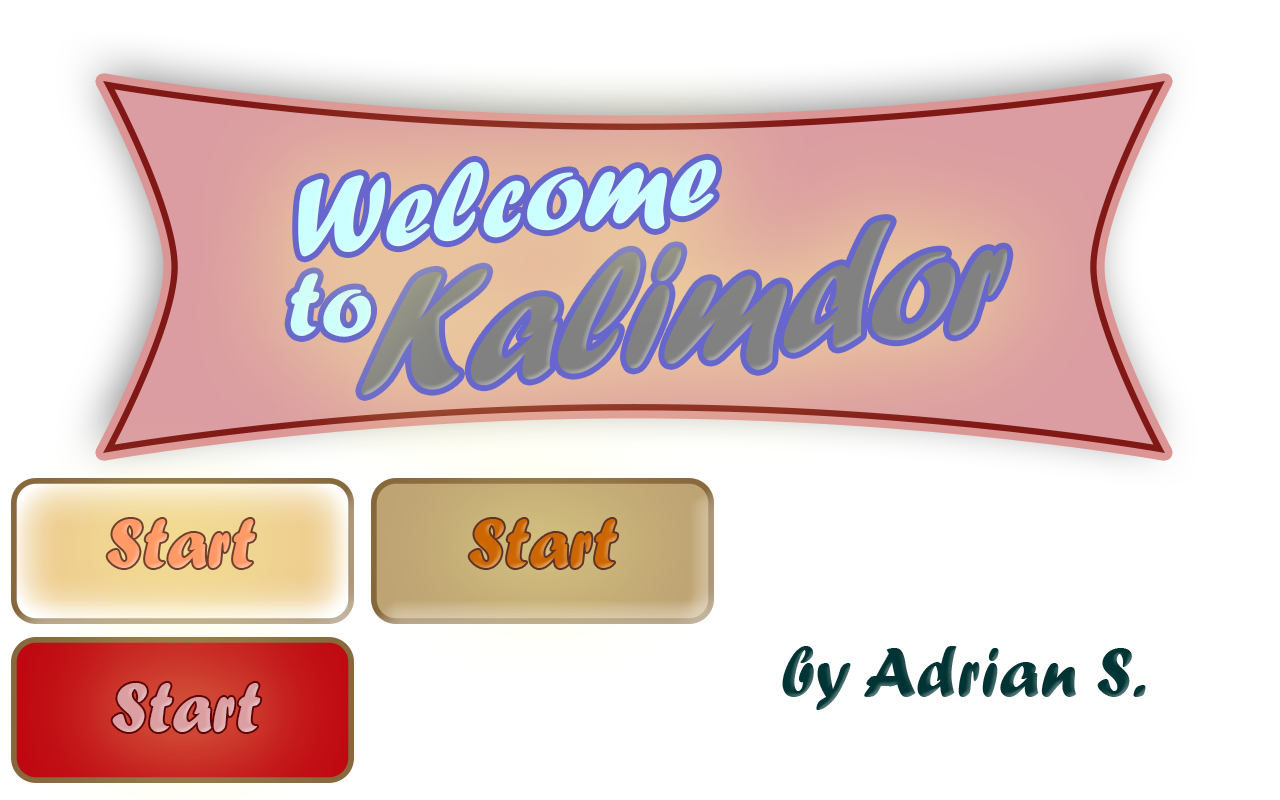
<style>
.page{position:relative;width:1280px;height:800px;background:#ffffff}
.page>*{position:absolute;margin:0}
.t1{font:114.3px "ForteMT";color:#ccffff}
.t2{font:180.3px "ForteMT";color:#828281;scale:0.86 1}
.t3{font:95.8px "ForteMT";color:#ccffff}
.t4{font:72px "ForteMT";color:#ff9966}
.t5{font:72px "ForteMT";color:#cc6600}
.t6{font:72px "ForteMT";color:#003333}
.t7{font:72px "ForteMT";color:#db9ea1}
</style>
<div class="page">
<p class="t1" style="left:298px;top:159px;width:418px;height:98px;rotate:-6deg">Welcome</p>
<p class="t2" style="left:361px;top:220px;width:647px;height:175px;rotate:-6deg">Kalimdor</p>
<p class="t3" style="left:290px;top:273px;width:81px;height:64px;rotate:-1deg">to</p>
<p class="t4" style="left:107px;top:519px;width:149px;height:49px">Start</p>
<p class="t5" style="left:469px;top:519px;width:149px;height:49px">Start</p>
<p class="t6" style="left:782px;top:646px;width:364px;height:64px">by Adrian S.</p>
<p class="t7" style="left:112px;top:683px;width:149px;height:49px">Start</p>
</div>
